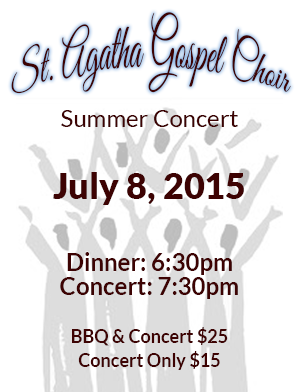
<style>
.page{position:relative;width:300px;height:392px;background:#ffffff}
.page>*{position:absolute;margin:0}
.t1{font:33px/24px "GreatVibes-Regular";color:#3d0303}
.t2{font:18px/24px "Lato-Bold";color:#3d0303}
.t3{font:24px/24px "Lato-Regular";color:#3d0303}
.t4{font:36px/24px "Lato-Black";color:#3d0303}
.t5{font:24px/24px "Lato-Bold";color:#3d0303}
</style>
<div class="page">
<p class="t1" style="left:11px;top:12px;width:280px;height:82px;text-align:center">St. Agatha Gospel Choir</p>
<p class="t2" style="left:53px;top:110px;width:191px;height:260px;text-align:center"><span class="t3">Summer Concert<br><br><br></span><span class="t4">July 8, 2015<br><br><br></span><span class="t5">Dinner: 6:30pm<br>Concert: 7:30pm<br><br></span>BBQ &amp; Concert $25<br>Concert Only $15</p>
</div>
